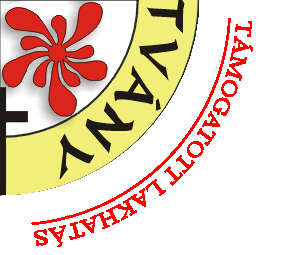
<style>
.page{position:relative;width:299px;height:255px;background:#ffffff}
.page>*{position:absolute;margin:0}
.t1{font:33.3px "Microsoft-Himalaya";color:#ff0000;text-decoration:underline}
</style>
<div class="page">
<p class="t1" style="left:31px;top:18px;width:222px;height:229px;rotate:134deg">TÁMOGATOTT LAKHATÁS</p>
</div>
